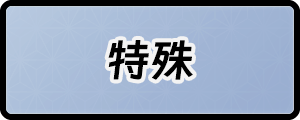
<style>
.page{position:relative;width:300px;height:120px}
.page>*{position:absolute;margin:0}
.t1{font:45px "DingTalk-JinBuTi";letter-spacing:-0.06em;color:#000000;font-weight:bold}
</style>
<div class="page">
<p class="t1" style="left:108px;top:40px;width:85px;height:40px">特殊</p>
</div>
